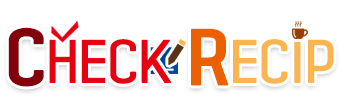
<style>
.page{position:relative;width:350px;height:100px;background:#ffffff}
.page>*{position:absolute;margin:0}
.t1{font:46px "KoreanYNSJG3-R";color:#e60012;font-weight:bold}
.t2{font:60px "KoreanYNSJG4-R";color:#82010b;font-weight:bold}
.t3{font:60px "KoreanYNSJG4-R";color:#eb6100;font-weight:bold}
.t4{font:46px "KoreanYNSJG3-R";color:#f8b551;font-weight:bold}
</style>
<div class="page">
<p class="t1" style="left:8px;top:27px;width:326px;height:60px"><span class="t2">C</span>HECK <span class="t3">R</span><span class="t4">ECIP</span></p>
</div>
